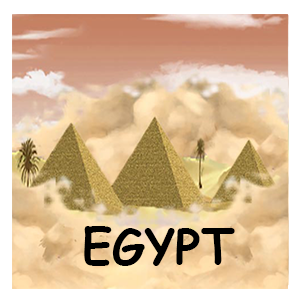
<style>
.page{position:relative;width:300px;height:300px}
.page>*{position:absolute;margin:0}
.t1{font:48px "ComicSansMS-Bold";color:#000000}
</style>
<div class="page">
<p class="t1" style="left:84px;top:226px;width:151px;height:40px">EGYPT</p>
</div>
